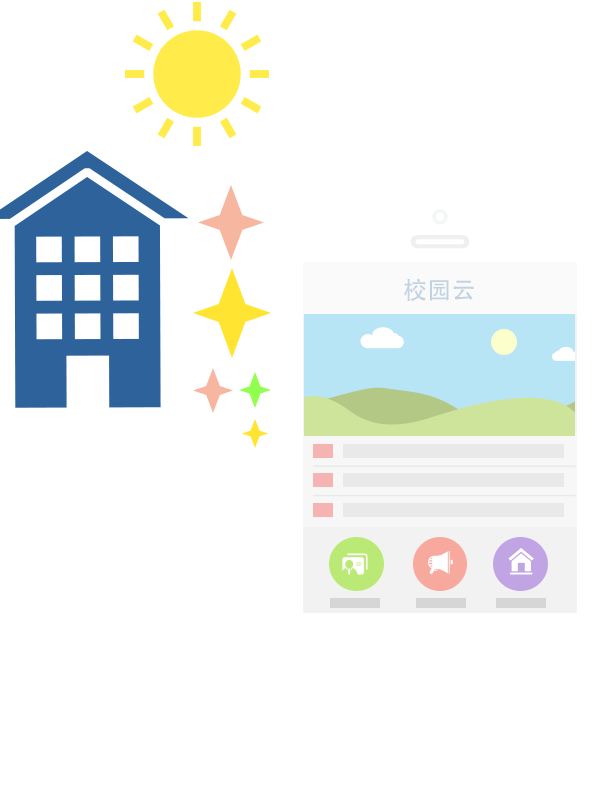
<style>
.page{position:relative;width:600px;height:800px;background:#ffffff}
.page>*{position:absolute;margin:0}
.t1{font:24.1px "AdobeHeitiStd-Regular";color:#c1d2e2}
</style>
<div class="page">
<p class="t1" style="left:404px;top:278px;width:70px;height:23px">校园云</p>
</div>
